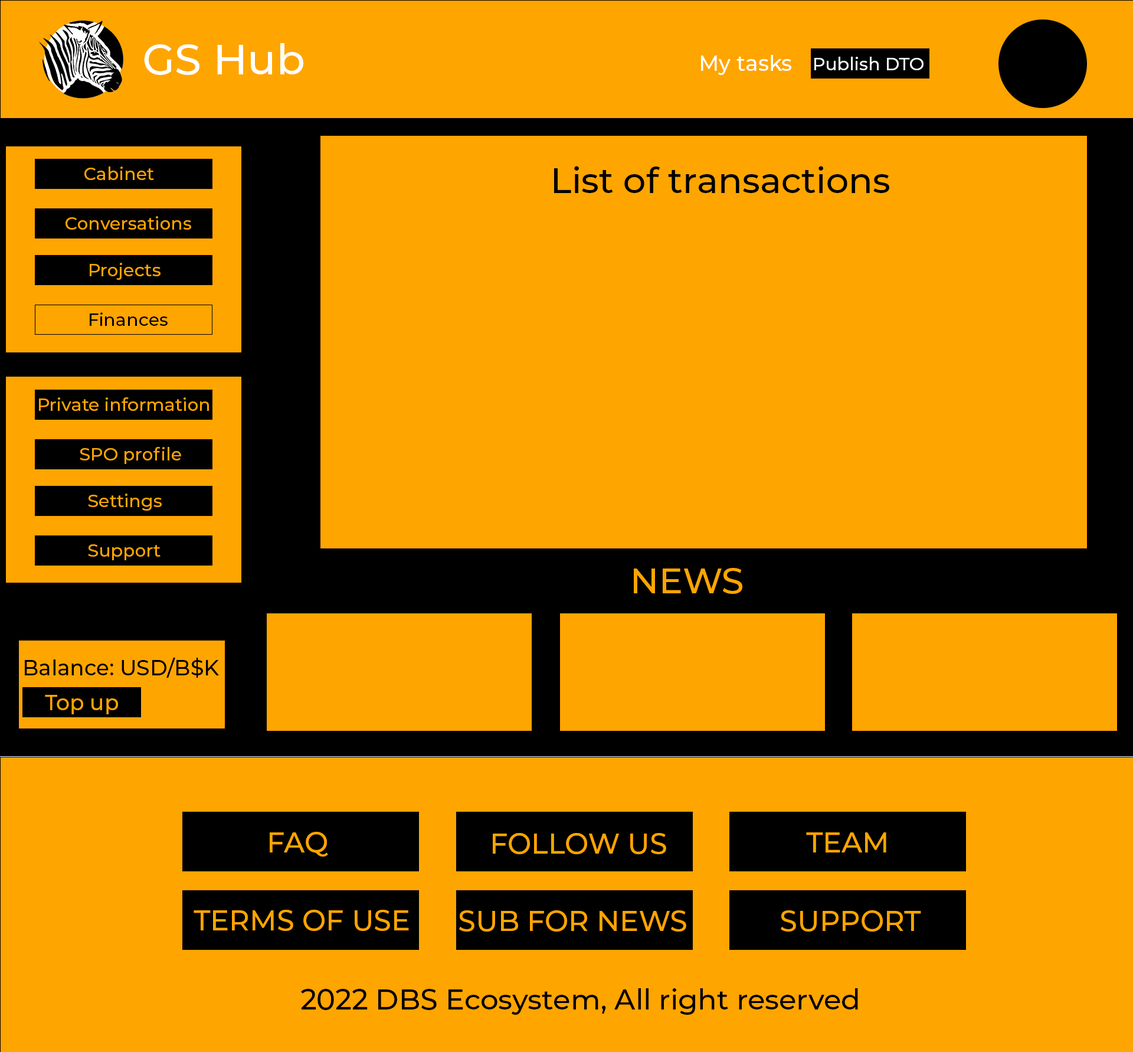
<style>
.page{position:relative;width:1133px;height:1052px;background:#ffa500}
.page>*{position:absolute;margin:0}
.t1{font:42.5px "Montserrat-Medium";color:#ffffff}
.t2{font:21.3px "Montserrat-Medium";color:#ffffff}
.t3{font:17.7px "Montserrat-Medium";color:#ffffff}
.t4{font:17.7px "Montserrat-Medium";color:#ffa500}
.t5{font:35.4px "Montserrat-Medium";color:#000000}
.t6{font:17.7px "Montserrat-Medium";color:#000000}
.t7{font:35.4px "Montserrat-Medium";color:#ffa500}
.t8{font:21.3px "Montserrat-Medium";color:#000000}
.t9{font:21.3px "Montserrat-Medium";color:#ffa500}
.t10{font:28.3px "Montserrat-Medium";color:#ffa500}
.t11{font:28.3px "Montserrat-Medium";color:#000000}
</style>
<div class="page">
<p class="t1" style="left:144px;top:43px;width:159px;height:32px">GS Hub</p>
<p class="t2" style="left:701px;top:55px;width:91px;height:20px">My tasks</p>
<p class="t3" style="left:815px;top:57px;width:109px;height:13px">Publish DTO</p>
<p class="t4" style="left:84px;top:166px;width:70px;height:14px">Cabinet</p>
<p class="t5" style="left:554px;top:166px;width:336px;height:27px">List of transactions</p>
<p class="t4" style="left:66px;top:216px;width:125px;height:14px">Conversations</p>
<p class="t4" style="left:90px;top:263px;width:71px;height:17px">Projects</p>
<p class="t6" style="left:90px;top:312px;width:78px;height:14px">Finances</p>
<p class="t4" style="left:39px;top:397px;width:170px;height:14px">Private information</p>
<p class="t4" style="left:80px;top:447px;width:101px;height:17px">SPO profile</p>
<p class="t4" style="left:88px;top:494px;width:74px;height:17px">Settings</p>
<p class="t4" style="left:88px;top:544px;width:73px;height:16px">Support</p>
<p class="t7" style="left:634px;top:568px;width:109px;height:26px">NEWS</p>
<p class="t8" style="left:25px;top:658px;width:194px;height:20px">Balance: USD/B$K</p>
<p class="t9" style="left:45px;top:695px;width:73px;height:19px">Top up</p>
<p class="t10" style="left:270px;top:832px;width:58px;height:25px">FAQ</p>
<p class="t10" style="left:493px;top:833px;width:174px;height:21px">FOLLOW US</p>
<p class="t10" style="left:806px;top:832px;width:81px;height:20px">TEAM</p>
<p class="t10" style="left:194px;top:910px;width:215px;height:21px">TERMS OF USE</p>
<p class="t10" style="left:459px;top:910px;width:228px;height:22px">SUB FOR NEWS</p>
<p class="t10" style="left:781px;top:910px;width:141px;height:22px">SUPPORT</p>
<p class="t11" style="left:301px;top:988px;width:557px;height:27px">2022 DBS Ecosystem, All right reserved</p>
</div>
